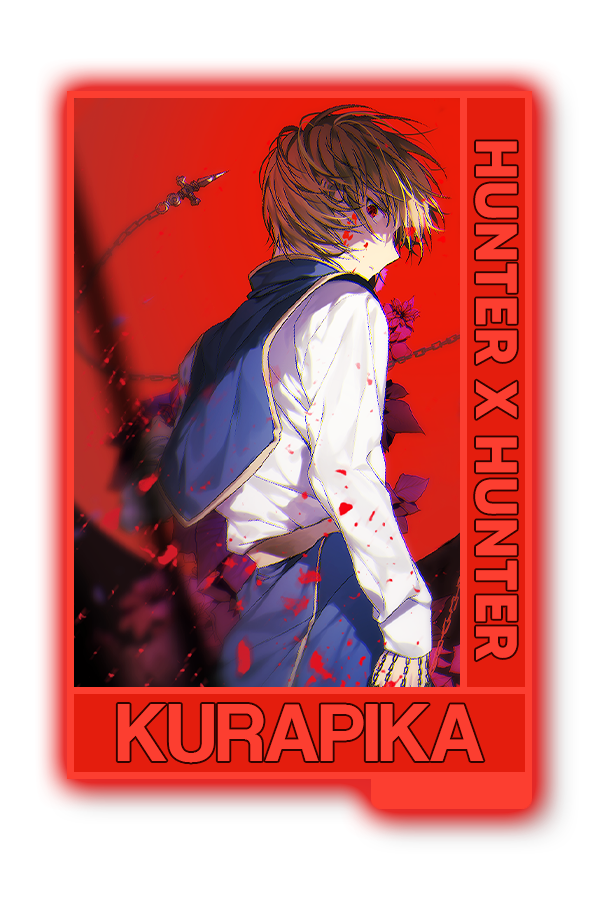
<style>
.page{position:relative;width:600px;height:900px;background:#ffffff}
.page>*{position:absolute;margin:0}
.t1{font:58.3px "MADETOMMY-Bold";color:#f84130}
.t2{font:84.2px "CoolveticaRg-Regular";color:#f84130}
</style>
<div class="page">
<p class="t1" style="left:475px;top:141px;width:42px;height:520px;rotate:90deg">HUNTER X HUNTER</p>
<p class="t2" style="left:117px;top:704px;width:367px;height:59px">KURAPIKA</p>
</div>
